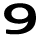
<style>
.page{position:relative;width:40px;height:40px;background:#ffffff}
.page>*{position:absolute;margin:0}
.t1{font:39.7px "NanumGothicBold";color:#000000;scale:1.61 1}
</style>
<div class="page">
<p class="t1" style="left:4px;top:3px;width:32px;height:32px">9</p>
</div>
